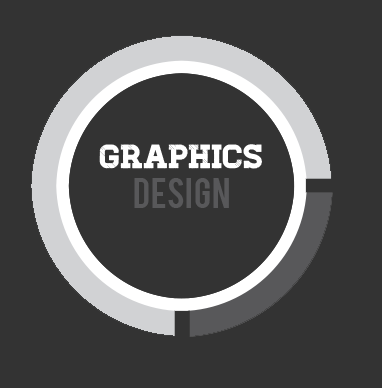
<style>
.page{position:relative;width:382px;height:388px;background:#333333}
.page>*{position:absolute;margin:0}
.t1{font:33.3px "Homestead-Display";color:#ffffff}
.t2{font:33.3px "Bebas";color:#58585a}
</style>
<div class="page">
<p class="t1" style="left:99px;top:144px;width:163px;height:64px;text-align:center">Graphics<br><span class="t2">Design</span></p>
</div>
